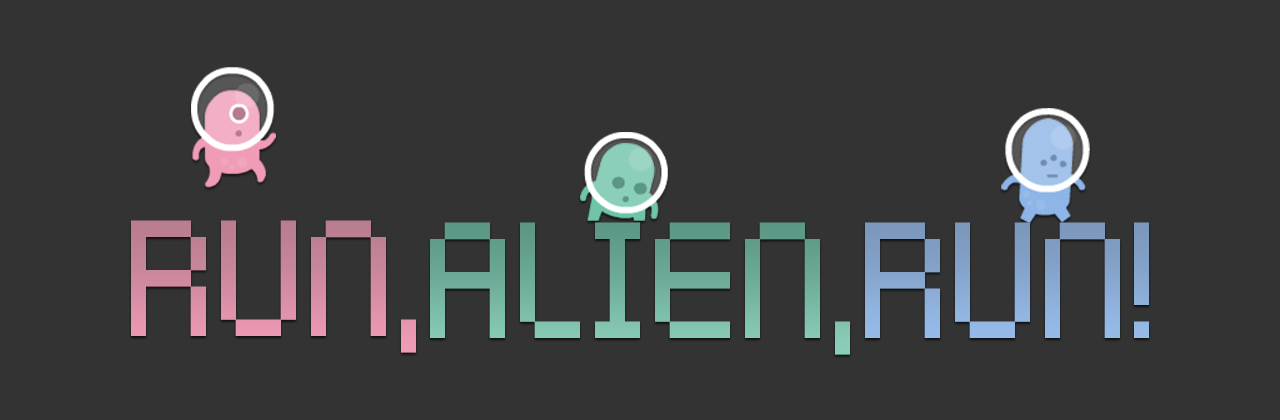
<style>
.page{position:relative;width:1280px;height:420px;background:#333333}
.page>*{position:absolute;margin:0}
.t1{font:132px "KenPixel";color:#ce899e;scale:0.91 1}
.t2{font:132px "KenPixel";color:#6ead9a;scale:0.91 1}
.t3{font:132px "KenPixel";color:#86a6cf;scale:0.91 1}
</style>
<div class="page">
<p class="t1" style="left:131px;top:220px;width:285px;height:133px">Run,</p>
<p class="t2" style="left:430px;top:222px;width:420px;height:133px">Alien,</p>
<p class="t3" style="left:865px;top:222px;width:284px;height:116px">Run!</p>
</div>
